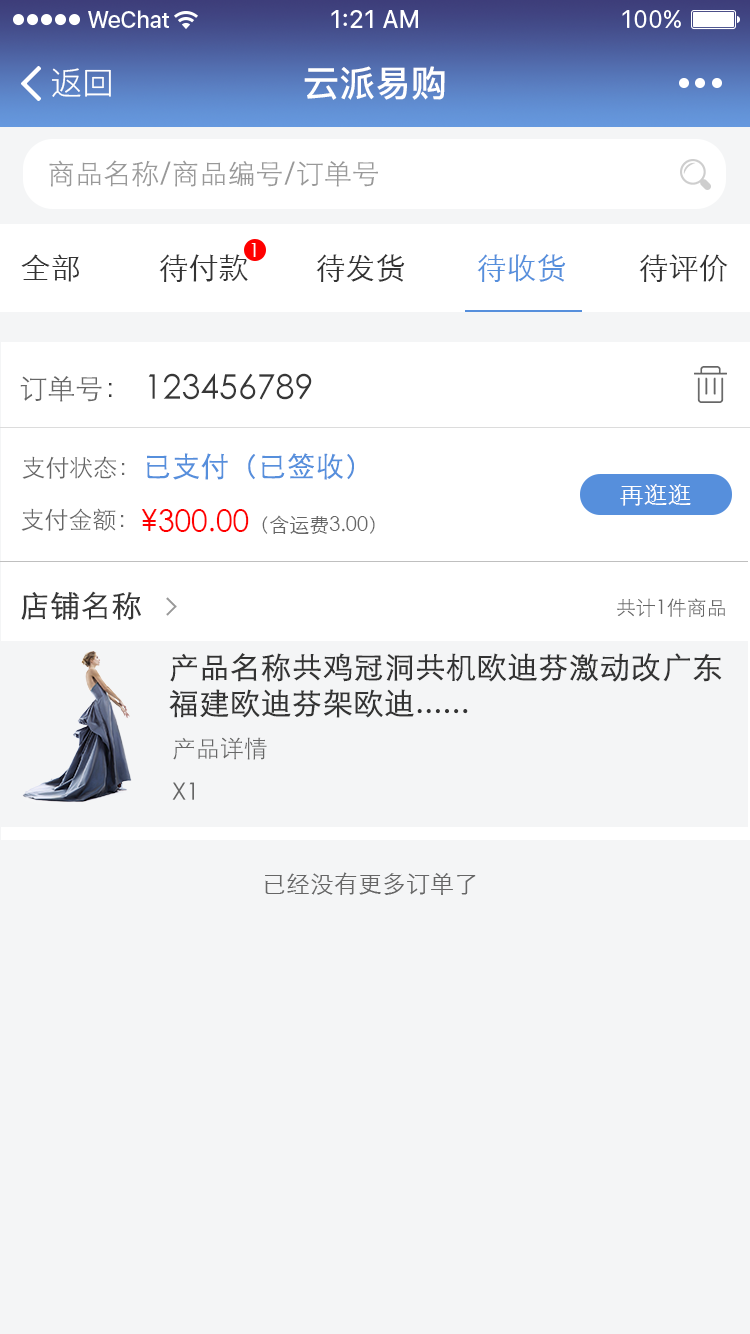
<style>
.page{position:relative;width:750px;height:1334px;background:#f4f5f6}
.page>*{position:absolute;margin:0}
.t1{font:32px "PingFang-SC-Regular";color:#ffffff}
.t2{font:36px "PingFang-SC-Bold";color:#ffffff}
.t3{font:28px "STXihei";color:#999999}
.t4{font:20px "STXihei";color:#fcfcfc}
.t5{font:30px "STXihei";color:#333333}
.t6{font:30px "STXihei";color:#568fdc}
.t7{font:28px "STXihei";color:#666666}
.t8{font:28px "STXihei";color:#373737}
.t9{font:34px "STXihei";color:#373737}
.t10{font:24px "STXihei";color:#666666}
.t11{font:28px "STXihei";color:#568fdc;font-weight:bold}
.t12{font:24px "STXihei";color:#fefeff}
.t13{font:20px "STXihei";color:#666666}
.t14{font:30px "STXihei";color:#ff0000}
.t15{font:30px "STXihei";color:#373737;font-weight:bold}
.t16{font:30px "STXihei";color:#333333;font-weight:bold}
</style>
<div class="page">
<p class="t1" style="left:52px;top:68px;width:59px;height:29px">返回</p>
<p class="t2" style="left:304px;top:66px;width:141px;height:34px">云派易购</p>
<p class="t3" style="left:49px;top:160px;width:329px;height:27px">商品名称/商品编号/订单号</p>
<p class="t4" style="left:251px;top:243px;width:5px;height:14px">1</p>
<p class="t5" style="left:21px;top:254px;width:58px;height:28px">全部</p>
<p class="t5" style="left:159px;top:254px;width:89px;height:28px">待付款</p>
<p class="t5" style="left:316px;top:254px;width:89px;height:28px">待发货</p>
<p class="t6" style="left:477px;top:254px;width:89px;height:28px">待收货</p>
<p class="t5" style="left:639px;top:254px;width:89px;height:28px">待评价</p>
<p class="t7" style="left:20px;top:376px;width:92px;height:26px">订单号<span class="t8">：</span></p>
<p class="t9" style="left:148px;top:373px;width:164px;height:27px">123456789</p>
<p class="t10" style="left:22px;top:456px;width:103px;height:23px">支付状态：</p>
<p class="t11" style="left:147px;top:453px;width:207px;height:27px">已支付（已签收）</p>
<p class="t12" style="left:620px;top:484px;width:71px;height:22px">再逛逛</p>
<p class="t10" style="left:21px;top:508px;width:103px;height:23px">支付金额：</p>
<p class="t13" style="left:141px;top:509px;width:234px;height:25px"><span class="t14">¥300.00</span>（含运费3.00）</p>
<p class="t15" style="left:21px;top:591px;width:120px;height:29px">店铺名称</p>
<p class="t13" style="left:617px;top:598px;width:108px;height:19px">共计1件商品</p>
<p class="t16" style="left:169px;top:653px;width:553px;height:65px">产品名称共鸡冠洞共机欧迪芬激动改广东福建欧迪芬架欧迪......</p>
<p class="t10" style="left:173px;top:737px;width:94px;height:23px">产品详情</p>
<p class="t10" style="left:172px;top:782px;width:22px;height:18px">X1</p>
<p class="t10" style="left:265px;top:872px;width:211px;height:23px">已经没有更多订单了</p>
</div>
